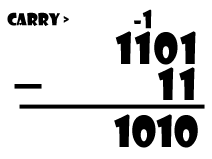
<style>
.page{position:relative;width:212px;height:159px;background:#ffffff}
.page>*{position:absolute;margin:0}
.t1{font:16px "ShowcardGothic-Reg";color:#000000}
.t2{font:24px "ShowcardGothic-Reg";color:#000000}
.t3{font:42px "ShowcardGothic-Reg";letter-spacing:0.04em;color:#000000}
.t4{font:42px "ShowcardGothic-Reg";letter-spacing:0.09em;color:#000000}
.t5{font:42px "ShowcardGothic-Reg";color:#000000}
</style>
<div class="page">
<p class="t1" style="left:7px;top:12px;width:62px;height:14px">carry &gt;</p>
<p class="t2" style="left:134px;top:9px;width:18px;height:20px">-1</p>
<p class="t3" style="left:115px;top:31px;width:81px;height:34px">1101</p>
<p class="t4" style="left:158px;top:67px;width:37px;height:33px">11</p>
<p class="t5" style="left:114px;top:114px;width:84px;height:34px">1010</p>
</div>
